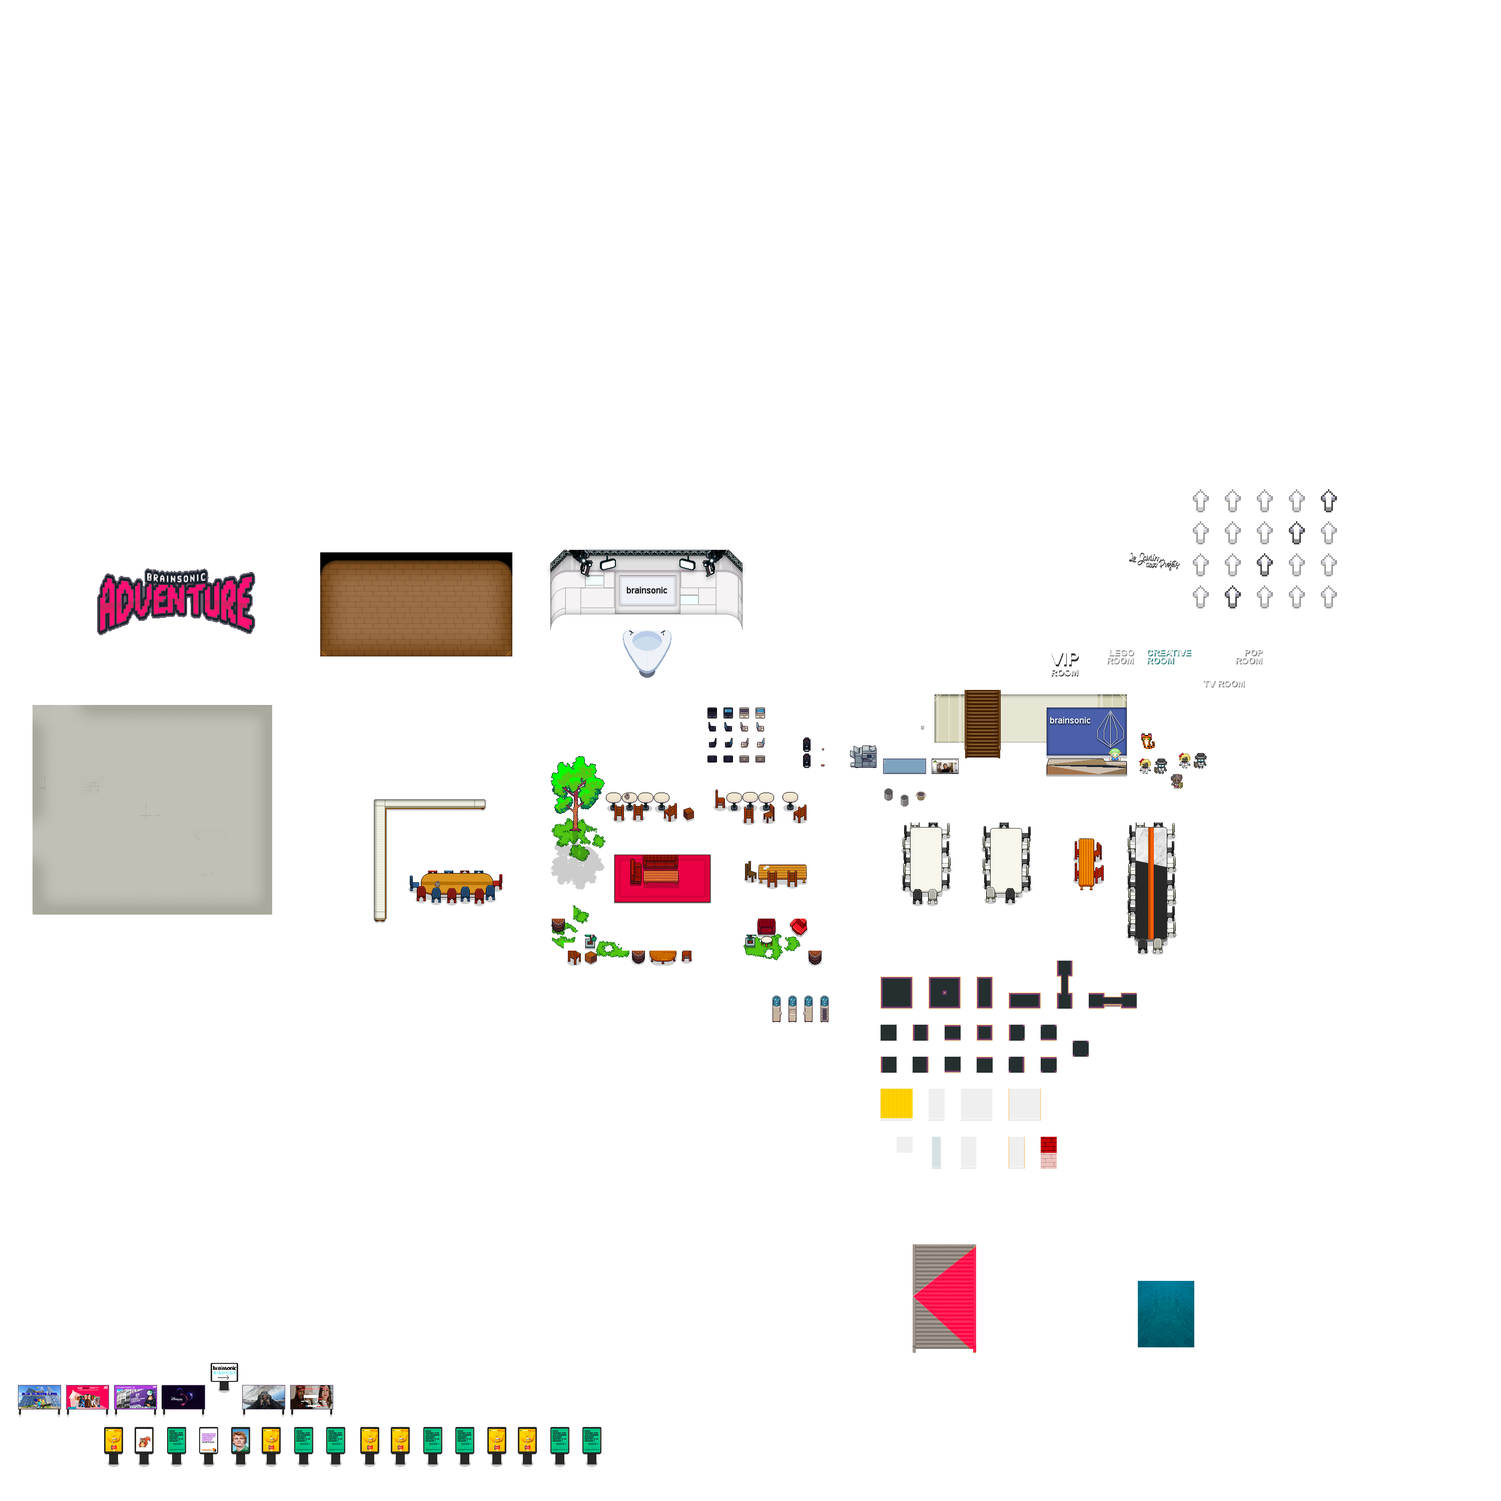
<style>
.page{position:relative;width:1501px;height:1501px;background:#ffffff}
.page>*{position:absolute;margin:0}
.t1{font:14px/6.5px "CrazySummerPersonalUse-Reg";scale:0.9 1}
.t2{font:14px/6.5px "CrazySummerPersonalUse-Reg";color:#666666;scale:0.9 1}
.t3{font:18px "Arial-BoldMT";color:#ffffff}
.t4{font:18px "Arial-BoldMT"}
.t5{font:9px/8px "Arial-BoldMT";color:#ffffff}
.t6{font:9px/8px "Arial-BoldMT"}
.t7{font:8.8px "Arial-BoldMT";color:#ffffff}
.t8{font:8.8px "Arial-BoldMT"}
.t9{font:9px "Arial-BoldMT"}
</style>
<div class="page">
<p class="t1" style="left:1129px;top:553px;width:51px;height:17px">Le Jardin <br>   aux Projets</p>
<p class="t2" style="left:1129px;top:553px;width:51px;height:18px">Le Jardin <br>   aux Projets</p>
<p class="t3" style="left:1051px;top:652px;width:27px;height:13px">VIP</p>
<p class="t4" style="left:1051px;top:654px;width:28px;height:13px">VIP</p>
<p class="t5" style="left:1107px;top:649px;width:27px;height:15px;text-align:right;opacity:0.77">LEGO<br>ROOM</p>
<p class="t6" style="left:1108px;top:650px;width:26px;height:15px;text-align:right">LEGO<br>ROOM</p>
<p class="t6" style="left:1148px;top:650px;width:44px;height:15px">CREATIVE <br>ROOM</p>
<p class="t6" style="left:1237px;top:650px;width:26px;height:15px;text-align:right">POP<br>ROOM</p>
<p class="t7" style="left:1051px;top:669px;width:27px;height:7px">ROOM</p>
<p class="t8" style="left:1052px;top:670px;width:26px;height:7px">ROOM</p>
<p class="t9" style="left:1204px;top:681px;width:41px;height:7px">TV ROOM</p>
</div>
